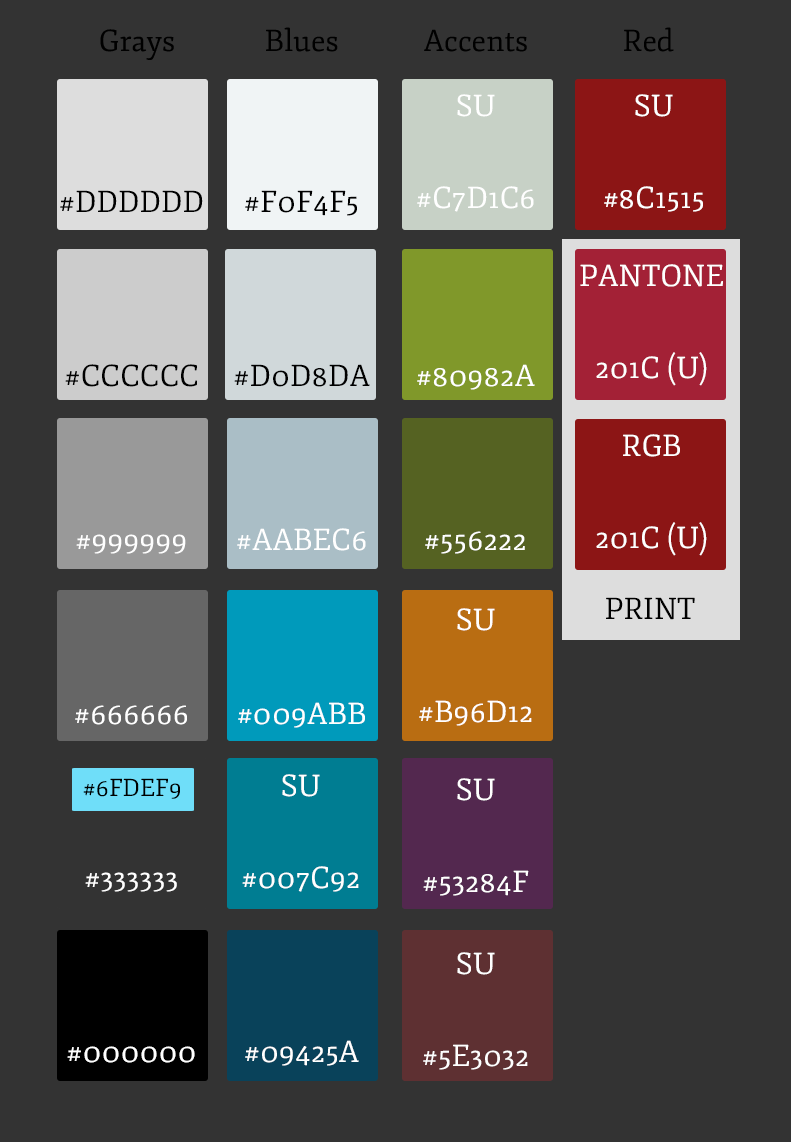
<style>
.page{position:relative;width:791px;height:1142px;background:#333333}
.page>*{position:absolute;margin:0}
.t1{font:30px "Fjord-One";color:#000000}
.t2{font:30px/36px "Fjord-One";color:#ffffff;text-transform:uppercase}
.t3{font:30px "Fjord-One";color:#000000;text-transform:uppercase}
.t4{font:30px "Fjord-One";color:#ffffff;text-transform:uppercase}
.t5{font:24.3px "Fjord-One";color:#000000;text-transform:uppercase}
</style>
<div class="page">
<p class="t1" style="left:100px;top:29px;width:74px;height:31px">Grays</p>
<p class="t1" style="left:266px;top:27px;width:72px;height:25px">Blues</p>
<p class="t1" style="left:424px;top:29px;width:103px;height:23px">Accents</p>
<p class="t1" style="left:624px;top:27px;width:50px;height:25px">Red</p>
<p class="t2" style="left:417px;top:94px;width:117px;height:118px;text-align:center">SU<br><br>#c7d1c6</p>
<p class="t2" style="left:604px;top:94px;width:99px;height:118px;text-align:center">SU<br><br>#8C1515</p>
<p class="t3" style="left:60px;top:190px;width:143px;height:22px">#dddddd</p>
<p class="t3" style="left:245px;top:190px;width:112px;height:26px">#f0f4f5</p>
<p class="t2" style="left:580px;top:264px;width:143px;height:122px;text-align:center">Pantone<br><br>201C (U)</p>
<p class="t3" style="left:65px;top:364px;width:132px;height:23px">#cccccc</p>
<p class="t3" style="left:234px;top:364px;width:136px;height:23px">#d0d8da</p>
<p class="t4" style="left:417px;top:364px;width:118px;height:26px">#80982a</p>
<p class="t2" style="left:596px;top:434px;width:111px;height:122px;text-align:center">RGB<br><br>201C (U)</p>
<p class="t4" style="left:76px;top:534px;width:110px;height:20px">#999999</p>
<p class="t4" style="left:237px;top:528px;width:129px;height:23px">#aabec6</p>
<p class="t4" style="left:425px;top:531px;width:100px;height:23px">#556222</p>
<p class="t3" style="left:606px;top:597px;width:89px;height:23px">Print</p>
<p class="t2" style="left:419px;top:608px;width:113px;height:118px;text-align:center">SU<br><br>#b96d12</p>
<p class="t4" style="left:238px;top:702px;width:127px;height:26px">#009abb</p>
<p class="t4" style="left:75px;top:705px;width:112px;height:20px">#666666</p>
<p class="t2" style="left:242px;top:774px;width:117px;height:118px;text-align:center">SU<br><br>#007C92</p>
<p class="t5" style="left:83px;top:778px;width:97px;height:21px">#6fdef9</p>
<p class="t2" style="left:423px;top:778px;width:106px;height:118px;text-align:center">SU<br><br>#53284F</p>
<p class="t4" style="left:85px;top:872px;width:92px;height:20px">#333333</p>
<p class="t2" style="left:423px;top:952px;width:105px;height:118px;text-align:center">SU<br><br>#5E3032</p>
<p class="t4" style="left:67px;top:1046px;width:128px;height:17px">#000000</p>
<p class="t4" style="left:245px;top:1040px;width:114px;height:26px">#09425a</p>
</div>
